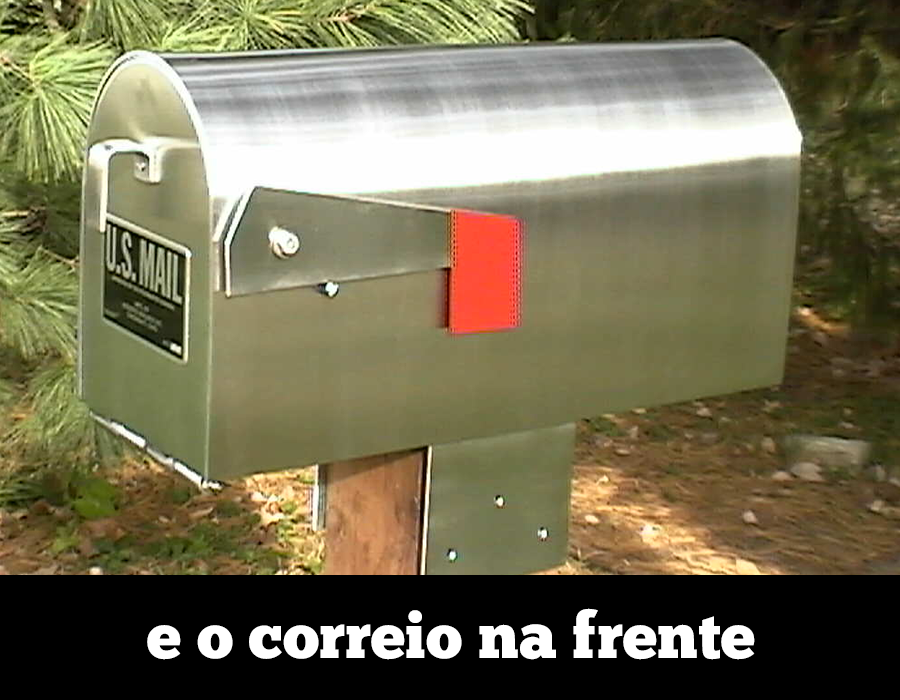
<style>
.page{position:relative;width:900px;height:700px}
.page>*{position:absolute;margin:0}
.t1{font:64px "ChunkFive-Roman";color:#ffffff}
</style>
<div class="page">
<p class="t1" style="left:147px;top:608px;width:608px;height:52px">e o correio na frente</p>
</div>
